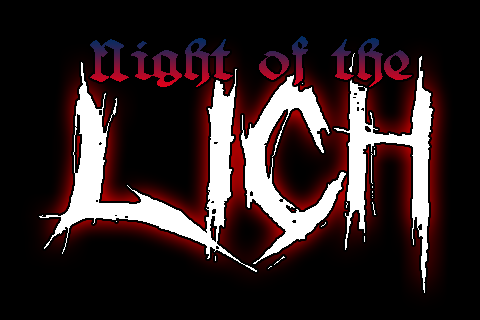
<style>
.page{position:relative;width:480px;height:320px;background:#000000}
.page>*{position:absolute;margin:0}
.t1{font:64px "BelweGotisch"}
.t2{font:192px "Crucifixion-Regular";color:#ffffff;scale:1.28 1}
</style>
<div class="page">
<p class="t1" style="left:90px;top:36px;width:322px;height:51px">Night of the</p>
<p class="t2" style="left:39px;top:53px;width:394px;height:240px">LICH</p>
</div>
